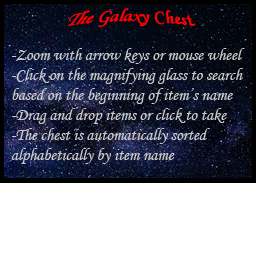
<style>
.page{position:relative;width:256px;height:256px;background:#ffffff}
.page>*{position:absolute;margin:0}
.t1{font:20px "MonotypeCorsiva";color:#fe0000}
.t2{font:16.7px "MonotypeCorsiva";color:#c9c9c9}
</style>
<div class="page">
<p class="t1" style="left:67px;top:8px;width:129px;height:20px">The Galaxy Chest</p>
<p class="t2" style="left:11px;top:48px;width:234px;height:116px">-Zoom with arrow keys or mouse wheel<br>-Click on the magnifying glass to search<br>based on the beginning of item’s name<br>-Drag and drop items or click to take<br>-The chest is automatically sorted<br>alphabetically by item name</p>
</div>
